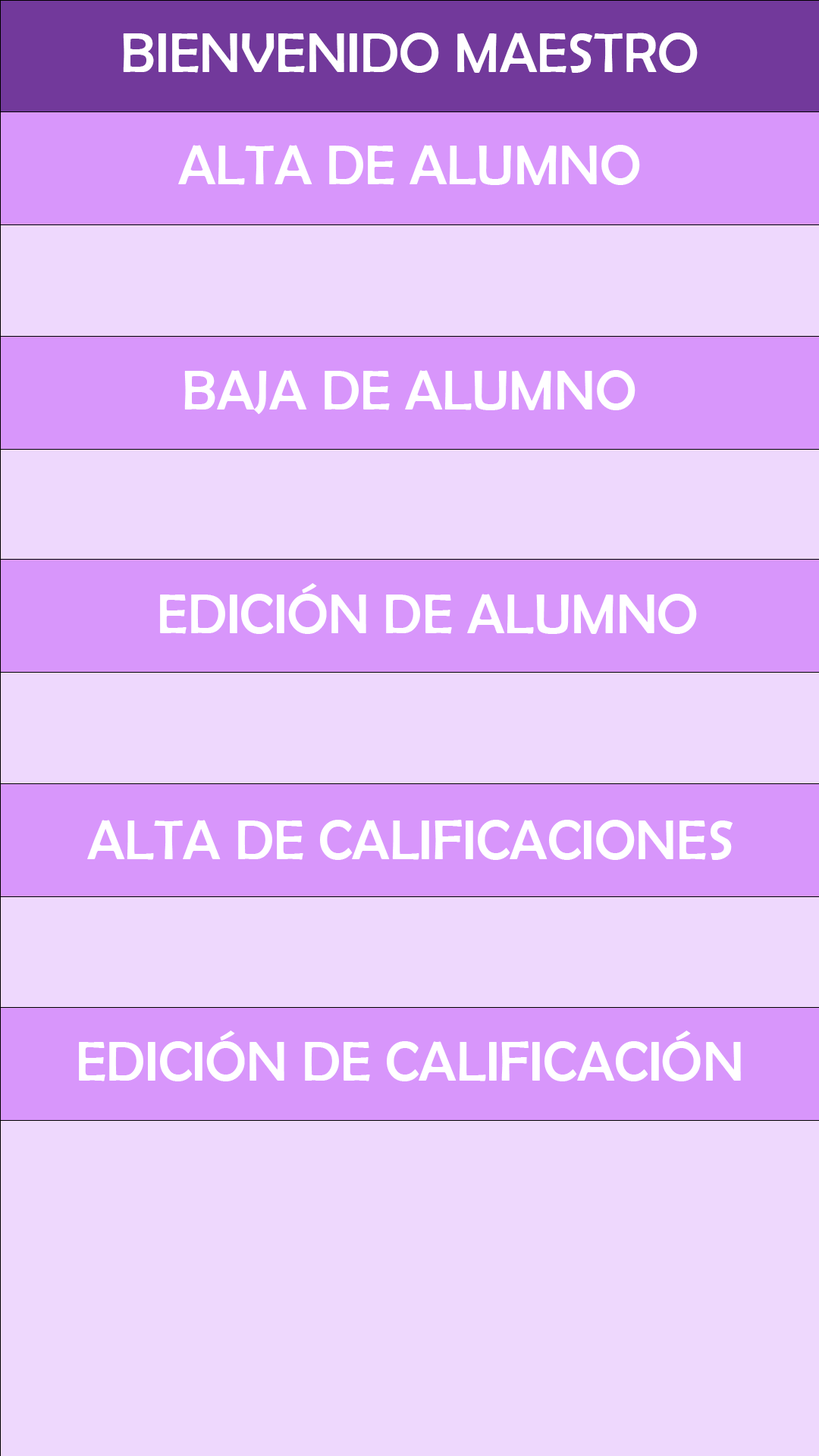
<style>
.page{position:relative;width:819px;height:1456px;background:#eed8fd}
.page>*{position:absolute;margin:0}
.t1{font:56.9px "BerlinSansFB-Reg";color:#ffffff;text-transform:uppercase}
</style>
<div class="page">
<p class="t1" style="left:123px;top:33px;width:575px;height:40px">BIENVENIDO MAESTRO</p>
<p class="t1" style="left:178px;top:145px;width:462px;height:40px">ALTA DE ALUMNO</p>
<p class="t1" style="left:184px;top:370px;width:451px;height:44px">Baja de alumno</p>
<p class="t1" style="left:160px;top:583px;width:537px;height:51px">EDICIÓN DE ALUMNO</p>
<p class="t1" style="left:87px;top:820px;width:646px;height:40px">Alta de calificaciones</p>
<p class="t1" style="left:79px;top:1031px;width:662px;height:50px">Edición de calificación</p>
</div>
